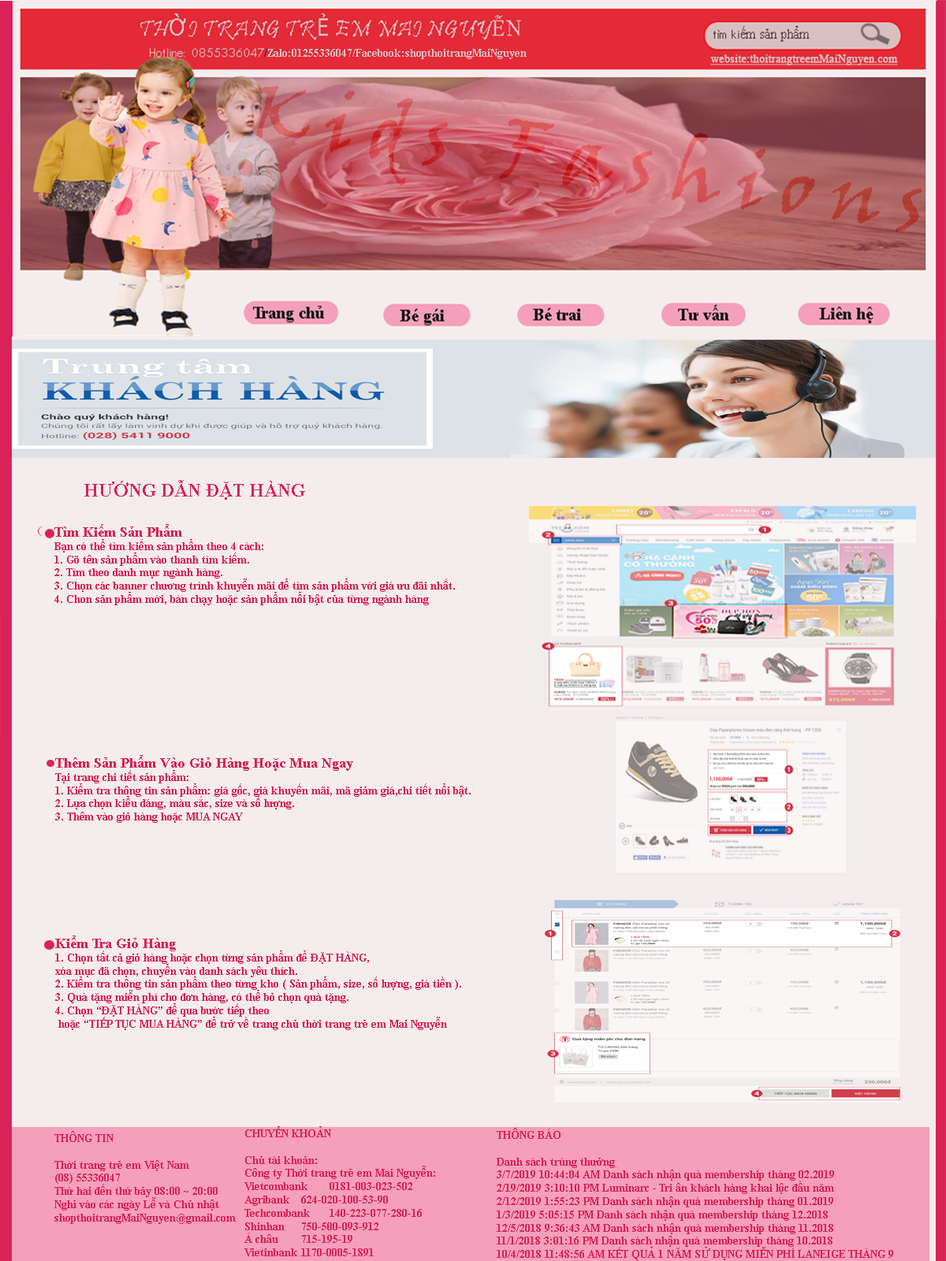
<style>
.page{position:relative;width:946px;height:1261px;background:#f5eced}
.page>*{position:absolute;margin:0}
.t1{font:11px "TimesNewRomanPS-BoldMT";color:#d8bfc2}
.t2{font:11px "TimesNewRomanPS-BoldMT";color:#282828}
.t3{font:11px "TimesNewRomanPSMT";color:#d8bfc2;font-weight:bold;text-decoration:underline}
.t4{font:18.9px "TimesNewRomanPS-BoldMT";color:#d92356}
.t5{font:11px "TimesNewRomanPS-BoldMT";color:#d92356}
.t6{font:14.2px "TimesNewRomanPS-BoldMT";color:#d92356}
</style>
<div class="page">
<p class="t1" style="left:264px;top:49px;width:262px;height:10px"><span class="t2">/</span>Zalo:01255336047/Facebook:shopthoitrangMaiNguyen</p>
<p class="t3" style="left:710px;top:54px;width:188px;height:11px">website:thoitrangtreemMaiNguyen.com</p>
<p class="t4" style="left:84px;top:480px;width:221px;height:20px">HƯỚNG DẪN ĐẶT HÀNG</p>
<p class="t5" style="left:54px;top:524px;width:401px;height:81px"><span class="t6">Tìm Kiếm Sản Phẩm<br></span>Bạn có thể tìm kiếm sản phẩm theo 4 cách:<br>1. Gõ tên sản phẩm vào thanh tìm kiếm.<br>2. Tìm theo danh mục ngành hàng.<br>3. Chọn các banner chương trình khuyễn mãi để tìm sản phẩm với giá ưu đãi nhất.<br>4. Chon sản phẩm mới, bán chạy hoặc sản phẩm nổi bật của từng ngành hàng</p>
<p class="t5" style="left:55px;top:755px;width:415px;height:68px"><span class="t6">Thêm Sản Phẩm Vào Giỏ Hàng Hoặc Mua Ngay<br></span>Tại trang chi tiết sản phẩm:<br>1. Kiểm tra thông tin sản phẩm: giá gốc, giá khuyến mãi, mã giảm giá,chi tiết nổi bật.<br>2. Lựa chọn kiểu dáng, màu sắc, size và số lượng.<br>3. Thêm vào giỏ hàng hoặc MUA NGAY</p>
<p class="t5" style="left:55px;top:935px;width:406px;height:95px"><span class="t6">Kiểm Tra Giỏ Hàng<br></span>1. Chọn tất cả giỏ hàng hoặc chọn từng sản phẩm để ĐẶT HÀNG, <br>xóa mục đã chọn, chuyển vào danh sách yêu thích.<br>2. Kiểm tra thông tin sản phẩm theo từng kho ( Sản phẩm, size, số lượng, giá tiền ).<br>3. Quà tặng miễn phí cho đơn hàng, có thể bỏ chọn quà tặng.<br>4. Chọn “ĐẶT HÀNG” để qua bước tiếp theo<br> hoặc “TIẾP TỤC MUA HÀNG” để trở về trang chủ thời trang trẻ em Mai Nguyễn</p>
<p class="t5" style="left:54px;top:1131px;width:182px;height:93px">THÔNG TIN<br><br>Thời trang trẻ em Việt Nam<br>(08) 55336047<br>Thứ hai đến thứ bảy 08:00 ~ 20:00<br>Nghỉ vào các ngày Lễ và Chủ nhật<br>shopthoitrangMaiNguyen@gmail.com</p>
<p class="t5" style="left:244px;top:1126px;width:191px;height:130px">CHUYỂN KHOẢN<br><br>Chủ tài khoản:<br>Công ty Thời trang trẻ em Mai Nguyễn:<br>Vietcombank 0181-003-023-502<br>Agribank 624-020-100-53-90<br>Techcombank 140-223-077-280-16<br>Shinhan 750-500-093-912<br>Á châu 715-195-19<br>Vietinbank 1170-0005-1891</p>
<p class="t5" style="left:496px;top:1128px;width:397px;height:132px">THÔNG BÁO<br><br>Danh sách trúng thưởng  <br>3/7/2019 10:44:04 AM Danh sách nhận quà membership tháng 02.2019<br>2/19/2019 3:10:10 PM Luminarc - Tri ân khách hàng khai lộc đầu năm<br>2/12/2019 1:55:23 PM Danh sách nhận quà membership tháng 01.2019<br>1/3/2019 5:05:15 PM Danh sách nhận quà membership tháng 12.2018<br>12/5/2018 9:36:43 AM Danh sách nhận quà membership tháng 11.2018<br>11/1/2018 3:01:16 PM Danh sách nhận quà membership tháng 10.2018<br>10/4/2018 11:48:56 AM KẾT QUẢ 1 NĂM SỬ DỤNG MIỄN PHÍ LANEIGE THÁNG 9</p>
</div>
